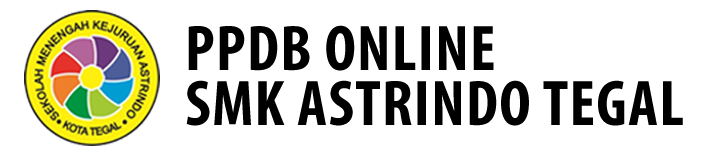
<style>
.page{position:relative;width:715px;height:156px;background:#ffffff}
.page>*{position:absolute;margin:0}
.t1{font:65px/55px "MyriadPro-BoldCond";letter-spacing:0.02em;color:#000000}
</style>
<div class="page">
<p class="t1" style="left:186px;top:25px;width:497px;height:101px">PPDB ONLINE<br>SMK ASTRINDO TEGAL</p>
</div>
